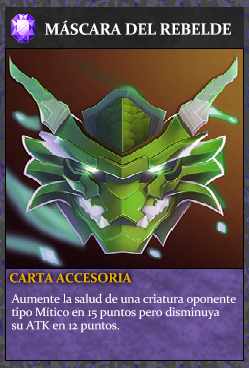
<style>
.page{position:relative;width:249px;height:368px}
.page>*{position:absolute;margin:0}
.t1{font:16px "Constantia-Bold";letter-spacing:-0.02em;color:#ffffff}
.t2{font:13.3px "Constantia-Bold";letter-spacing:-0.02em;color:#f2ac05}
.t3{font:12.3px/13.3px "Constantia";letter-spacing:-0.02em;color:#ffffff}
</style>
<div class="page">
<p class="t1" style="left:45px;top:20px;width:186px;height:15px">MÁSCARA DEL REBELDE</p>
<p class="t2" style="left:10px;top:273px;width:122px;height:10px">CARTA ACCESORIA</p>
<p class="t3" style="left:11px;top:293px;width:225px;height:40px">Aumente la salud de una criatura oponente<br>tipo Mítico en 15 puntos pero disminuya<br>su ATK en 12 puntos.</p>
</div>
